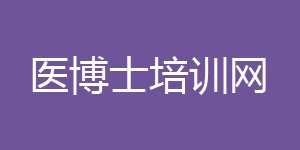
<style>
.page{position:relative;width:300px;height:150px;background:#6f5499}
.page>*{position:absolute;margin:0}
.t1{font:40px "MicrosoftYaHei";color:#ffffff}
</style>
<div class="page">
<p class="t1" style="left:32px;top:56px;width:234px;height:39px">医博士培训网</p>
</div>
